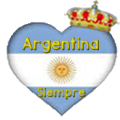
<style>
.page{position:relative;width:120px;height:120px;background:#ffffff}
.page>*{position:absolute;margin:0}
.t1{font:14.4px "KGRedHands"}
.t2{font:10.8px "KGRedHands"}
</style>
<div class="page">
<p class="t1" style="left:22px;top:37px;width:77px;height:17px">Argentina</p>
<p class="t2" style="left:37px;top:87px;width:49px;height:13px">Siempre</p>
</div>
